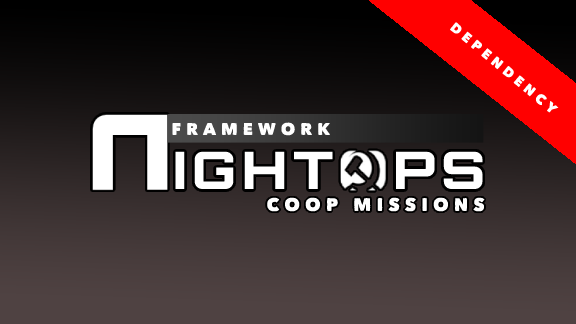
<style>
.page{position:relative;width:576px;height:324px}
.page>*{position:absolute;margin:0}
.t1{font:14px "Matiz";letter-spacing:0.28em;color:#ffffff}
.t2{font:17px "Matiz";letter-spacing:0.28em;color:#ffffff}
.t3{font:51.7px "Orbitron-ExtraBold";letter-spacing:0.11em;color:#ffffff;font-weight:bold}
.t4{font:18.3px "Matiz";letter-spacing:0.28em;color:#ffffff}
</style>
<div class="page">
<p class="t1" style="left:449px;top:22px;width:110px;height:91px;rotate:40deg">DEPENDENCY</p>
<p class="t2" style="left:172px;top:122px;width:159px;height:14px">FRAMEWORK</p>
<p class="t3" style="left:175px;top:151px;width:308px;height:38px">IGHT  PS</p>
<p class="t4" style="left:267px;top:197px;width:218px;height:15px">COOP MISSIONS</p>
</div>
